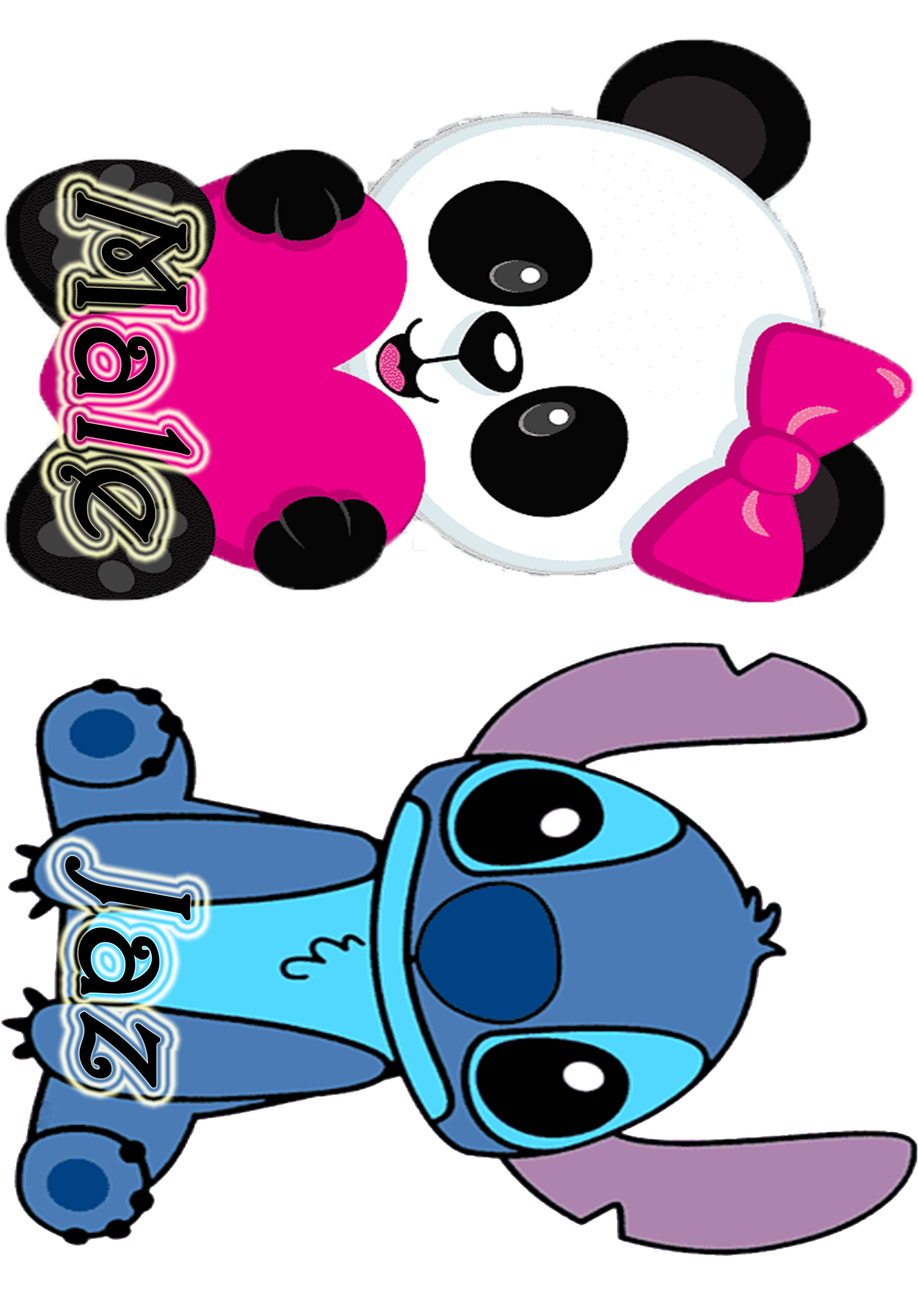
<style>
.page{position:relative;width:918px;height:1299px;background:#ffffff}
.page>*{position:absolute;margin:0}
.t1{font:154.3px "Harrington";letter-spacing:0.025em;color:#010101;font-weight:bold;font-style:italic}
.t2{font:154.3px "Harrington";letter-spacing:0.025em;color:#000000;font-weight:bold;font-style:italic}
</style>
<div class="page">
<p class="t1" style="left:60px;top:192px;width:131px;height:351px;rotate:90deg">Male</p>
<p class="t2" style="left:65px;top:856px;width:126px;height:232px;rotate:90deg">Jaz</p>
</div>
